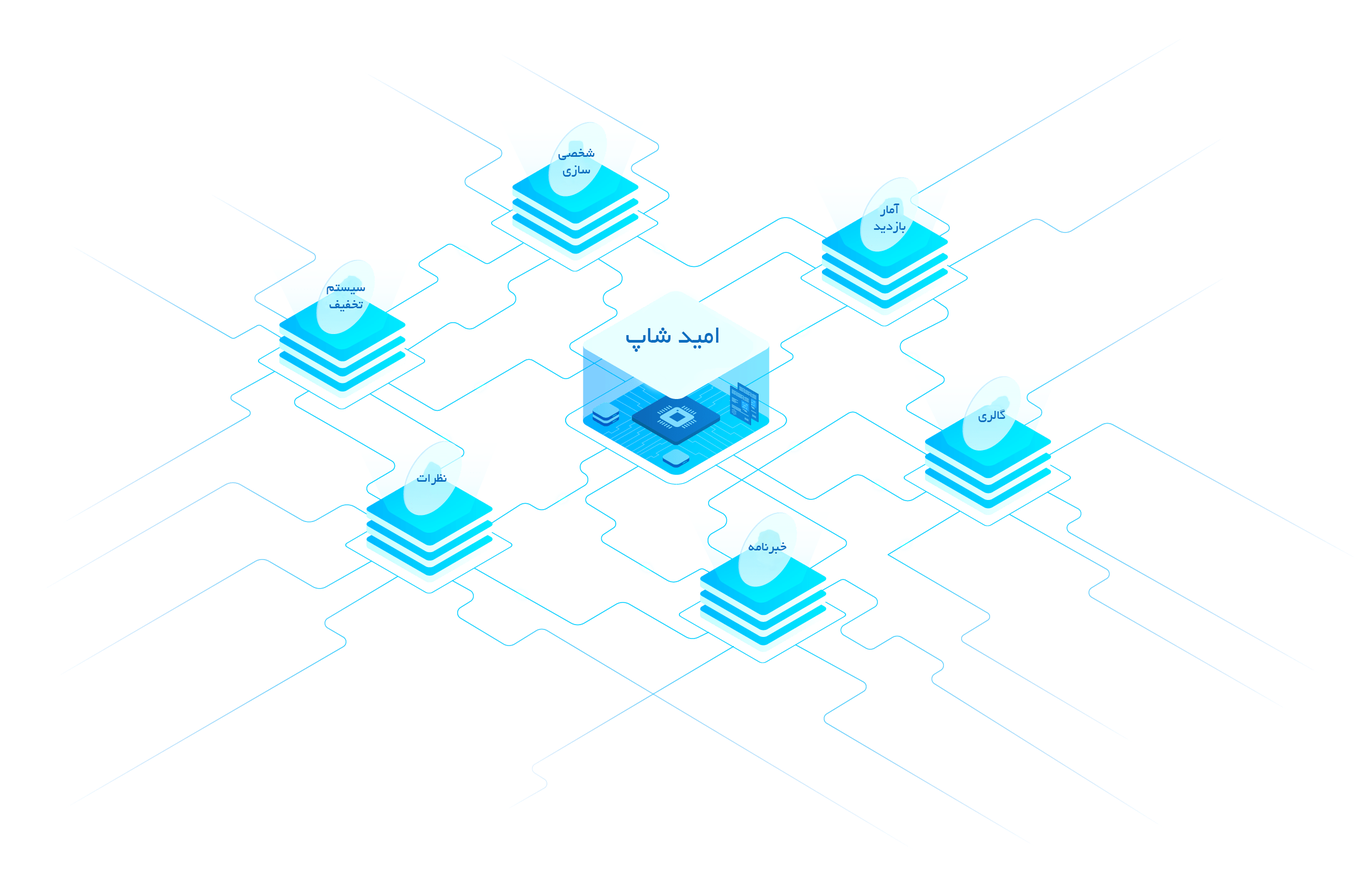
<style>
.page{position:relative;width:1370px;height:870px;background:#ffffff}
.page>*{position:absolute;margin:0}
.t1{font:14px "BYekan";color:#0b6dbf}
.t2{font:26.9px "BYekan";color:#0b6dbf}
.t3{font:13.4px "BYekan";color:#0b6dbf}
</style>
<div class="page">
<p class="t1" style="left:558px;top:149px;width:37px;height:28px;text-align:center">شخصی سازی</p>
<p class="t1" style="left:874px;top:204px;width:32px;height:29px;text-align:center">آمار بازدید</p>
<p class="t1" style="left:327px;top:285px;width:38px;height:27px;text-align:center">سیستم تخفیف</p>
<p class="t2" style="left:626px;top:328px;width:93px;height:24px">امید شاپ</p>
<p class="t1" style="left:978px;top:409px;width:27px;height:13px">گالری</p>
<p class="t3" style="left:417px;top:474px;width:29px;height:11px">نظرات</p>
<p class="t1" style="left:748px;top:543px;width:39px;height:11px">خبرنامه</p>
</div>
